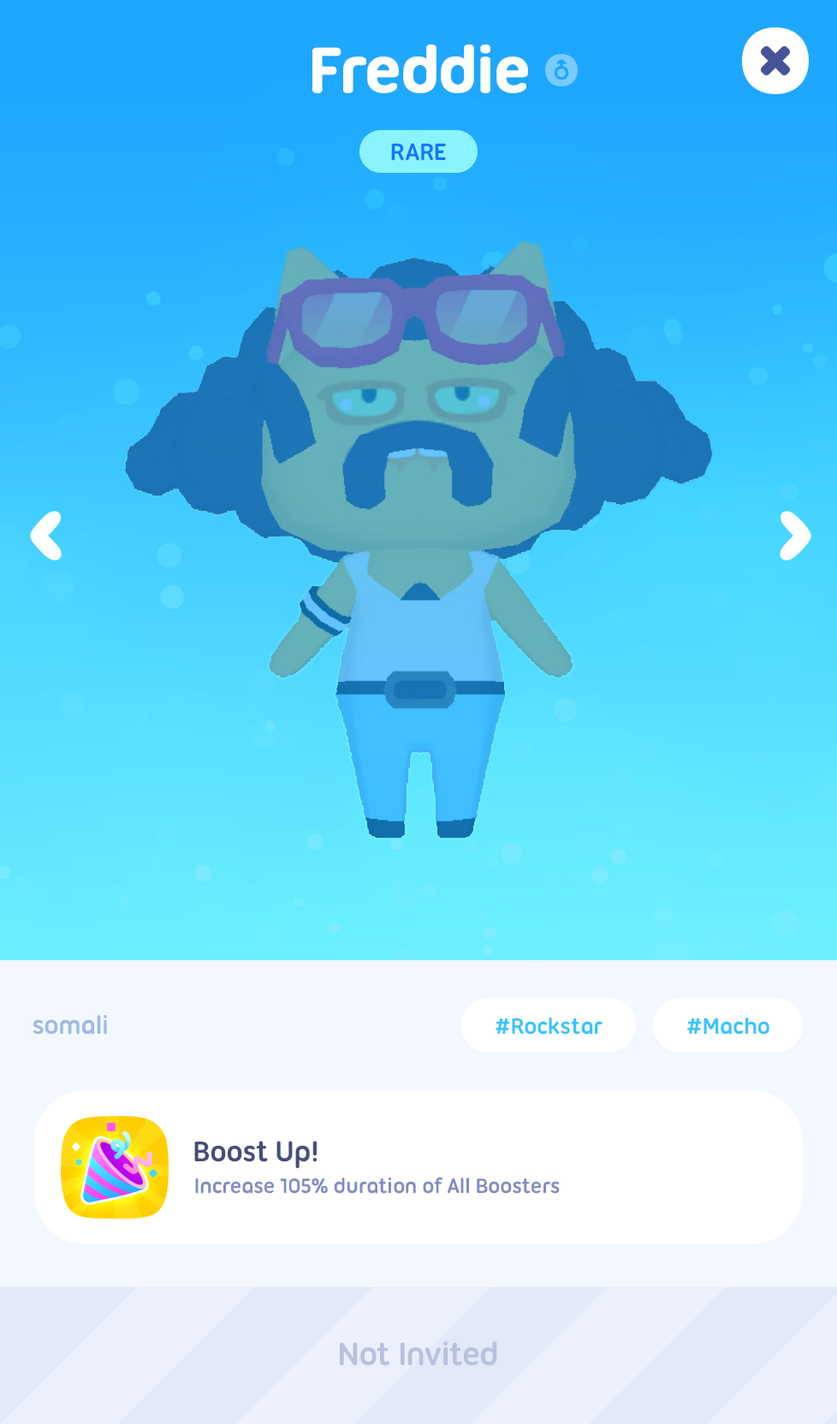
<style>
.page{position:relative;width:837px;height:1424px}
.page>*{position:absolute;margin:0}
.t1{font:68.5px "UbuntuTitling-Bold";letter-spacing:-0.025em;color:#ffffff;font-weight:bold}
.t2{font:25.7px "UbuntuTitling-Bold";letter-spacing:-0.025em;color:#1276ff;text-transform:uppercase}
.t3{font:27.4px "UbuntuTitling-Bold";letter-spacing:-0.025em;color:#a0b9e6}
.t4{font:24px "UbuntuTitling-Bold";letter-spacing:-0.025em;color:#37c4ff}
.t5{font:30.8px "UbuntuTitling-Bold";letter-spacing:-0.025em;color:#454e7b}
.t6{font:22.3px "UbuntuTitling-Bold";letter-spacing:-0.025em;color:#818cc2}
.t7{font:34.2px "UbuntuTitling-Bold";letter-spacing:-0.025em;color:#b9c1dc}
</style>
<div class="page">
<p class="t1" style="left:312px;top:45px;width:216px;height:48px">Freddie</p>
<p class="t2" style="left:391px;top:143px;width:55px;height:18px">Rare</p>
<p class="t3" style="left:33px;top:1015px;width:74px;height:20px">somali</p>
<p class="t4" style="left:496px;top:1018px;width:107px;height:17px">#Rockstar</p>
<p class="t4" style="left:687px;top:1018px;width:83px;height:17px">#Macho</p>
<p class="t5" style="left:194px;top:1141px;width:123px;height:27px">Boost Up!</p>
<p class="t6" style="left:195px;top:1177px;width:365px;height:17px">Increase 105% duration of All Boosters</p>
<p class="t7" style="left:340px;top:1341px;width:157px;height:25px">Not Invited</p>
</div>
